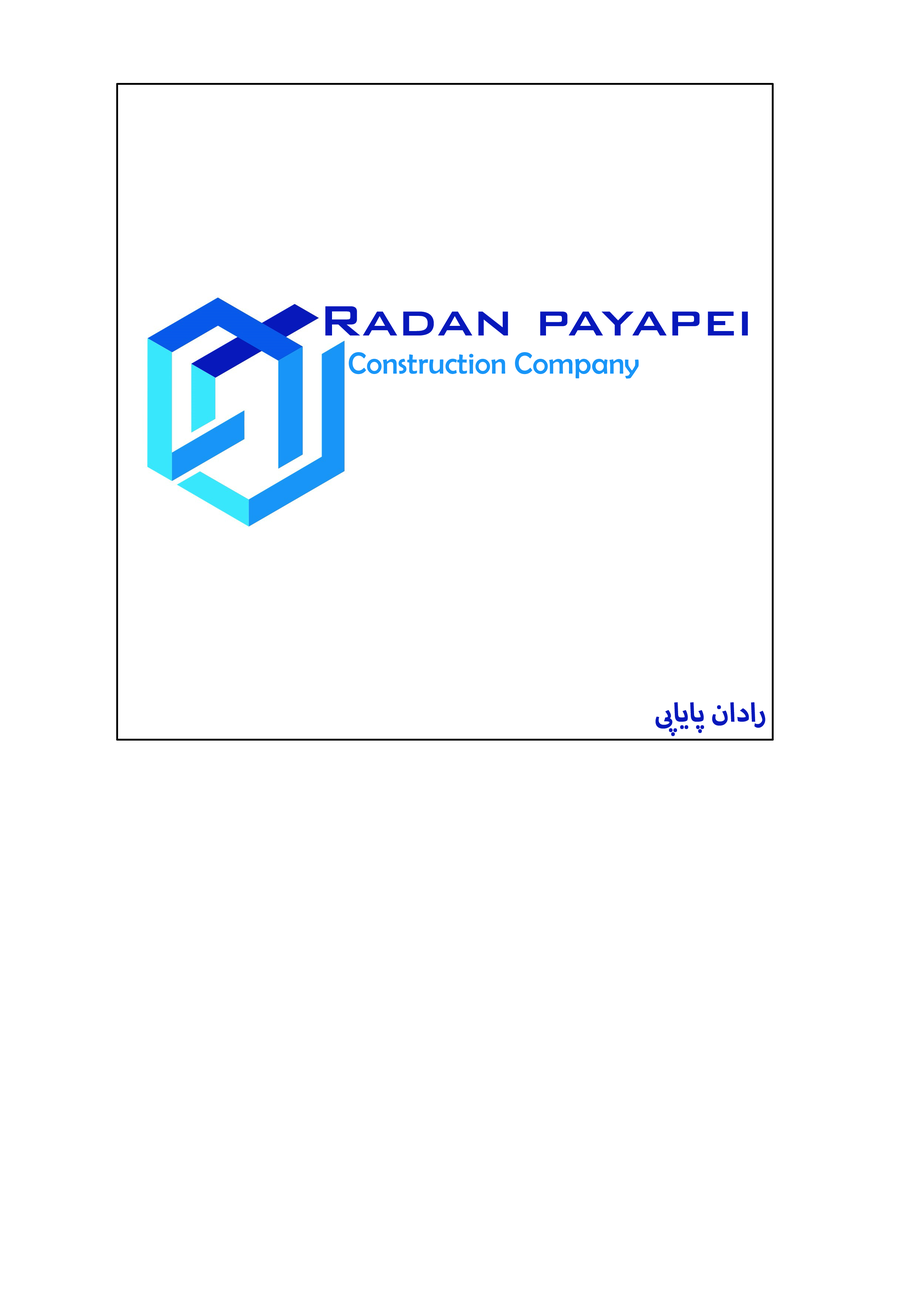
<style>
.page{position:relative;width:918px;height:1299px;background:#ffffff}
.page>*{position:absolute;margin:0}
.t1{font:56.5px "BankGothicBT-Medium";color:#0718bb}
.t2{font:30.6px "BerlinSansFB-Reg";color:#1895f8}
.t3{font:37px "MyriadArabic-Bold";color:#0718bb}
</style>
<div class="page">
<p class="t1" style="left:325px;top:306px;width:423px;height:29px">Radan payapei</p>
<p class="t2" style="left:349px;top:352px;width:290px;height:27px">Construction Company</p>
<p class="t3" style="left:656px;top:702px;width:110px;height:34px">رادان پایاپی</p>
</div>
